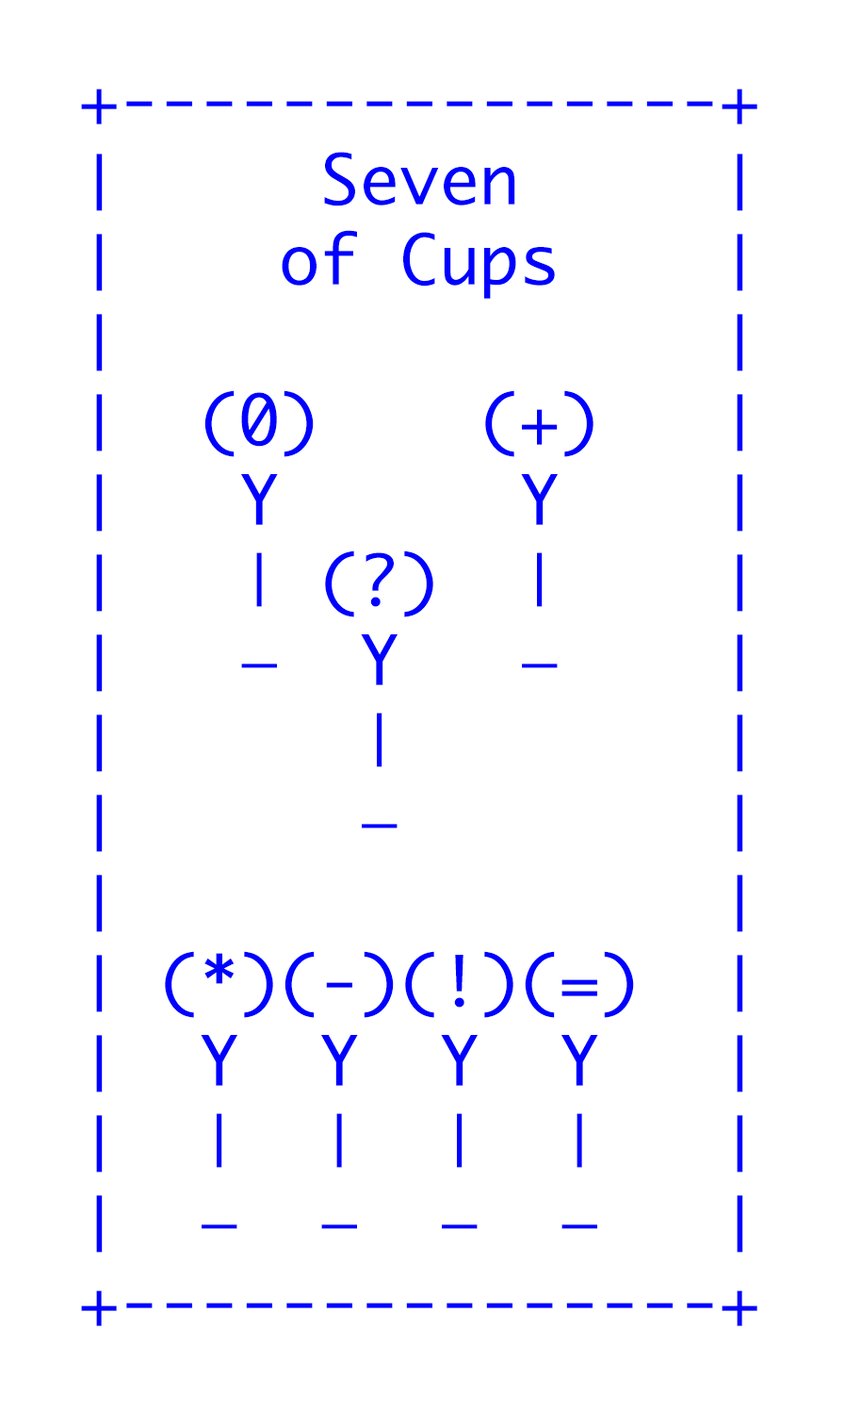
<style>
.page{position:relative;width:845px;height:1411px;background:#ffffff}
.page>*{position:absolute;margin:0}
.t1{font:66.7px "Monaco";color:#0000ff}
</style>
<div class="page">
<p class="t1" style="left:81px;top:89px;width:677px;height:1237px">+---------------+<br>│     Seven     │<br>│    of Cups    │<br>│               │<br>│  (0)    (+)   │ <br>│   Y      Y    │<br>│   | (?)  |    │ <br>│   —  Y   —    │<br>│      |        │ <br>│      —        │<br>│               │ <br>│ (*)(-)(!)(=)  │ <br>│  Y  Y  Y  Y   │<br>│  |  |  |  |   │ <br>│  —  —  —  —   │<br>+---------------+</p>
</div>
